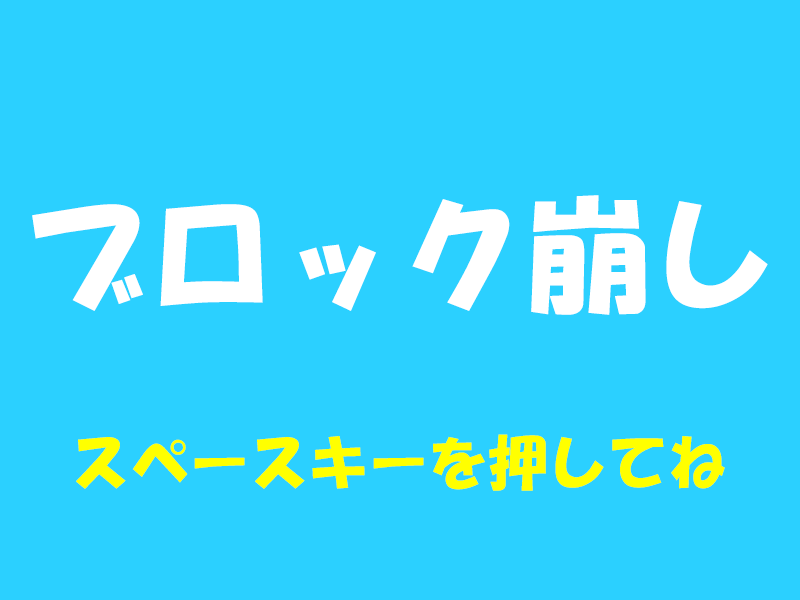
<style>
.page{position:relative;width:800px;height:600px;background:#2bd0ff}
.page>*{position:absolute;margin:0}
.t1{font:125.3px "HGSoeiKakupoptai";color:#ffffff}
.t2{font:59.8px "HGSoeiKakupoptai";color:#ffff00}
</style>
<div class="page">
<p class="t1" style="left:32px;top:195px;width:736px;height:120px">ブロック崩し</p>
<p class="t2" style="left:76px;top:434px;width:649px;height:57px">スペースキーを押してね</p>
</div>
